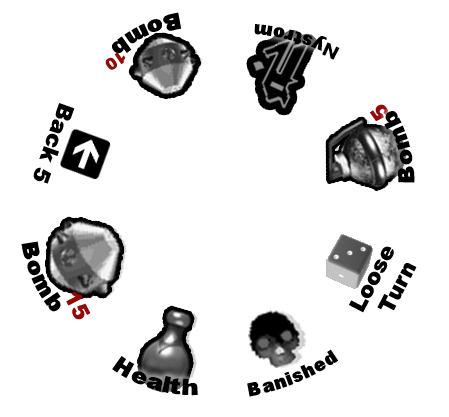
<style>
.page{position:relative;width:449px;height:417px;background:#ffffff}
.page>*{position:absolute;margin:0}
.t1{font:22px "Arial-Black";color:#000000}
.t2{font:18px "Arial-Black";color:#000000}
.t3{font:16px "Arial-Black";color:#960707}
.t4{font:22px "Arial-Black";color:#960707}
</style>
<div class="page">
<p class="t1" style="left:112px;top:12px;width:70px;height:42px;rotate:154deg">Bomb</p>
<p class="t2" style="left:254px;top:24px;width:86px;height:36px;rotate:-164deg">Nystrom</p>
<p class="t3" style="left:105px;top:52px;width:21px;height:18px;rotate:146deg">10</p>
<p class="t1" style="left:33px;top:103px;width:42px;height:81px;rotate:110deg">Back 5</p>
<p class="t4" style="left:370px;top:104px;width:19px;height:17px;rotate:-126deg">5</p>
<p class="t1" style="left:384px;top:111px;width:31px;height:72px;rotate:-105deg">Bomb</p>
<p class="t1" style="left:21px;top:241px;width:40px;height:71px;rotate:66deg">Bomb</p>
<p class="t1" style="left:349px;top:246px;width:68px;height:67px;text-align:center;rotate:-62deg">Loose <br>Turn</p>
<p class="t4" style="left:66px;top:291px;width:25px;height:29px;rotate:63deg">15</p>
<p class="t2" style="left:247px;top:349px;width:91px;height:48px;rotate:-22deg">Banished</p>
<p class="t1" style="left:112px;top:356px;width:86px;height:40px;rotate:17deg">Health</p>
</div>
